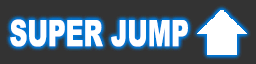
<style>
.page{position:relative;width:256px;height:64px;background:#333333}
.page>*{position:absolute;margin:0}
.t1{font:36.3px "Arial-Black";color:#ffffff;scale:0.68 1}
</style>
<div class="page">
<p class="t1" style="left:10px;top:19px;width:178px;height:28px">SUPER JUMP</p>
</div>
